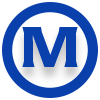
<style>
.page{position:relative;width:100px;height:100px;background:#0a40ab}
.page>*{position:absolute;margin:0}
.t1{font:59.8px "Arpona-SemiBold";color:#0a40ab;scale:1.17 1}
</style>
<div class="page">
<p class="t1" style="left:22px;top:27px;width:56px;height:40px">M</p>
</div>
